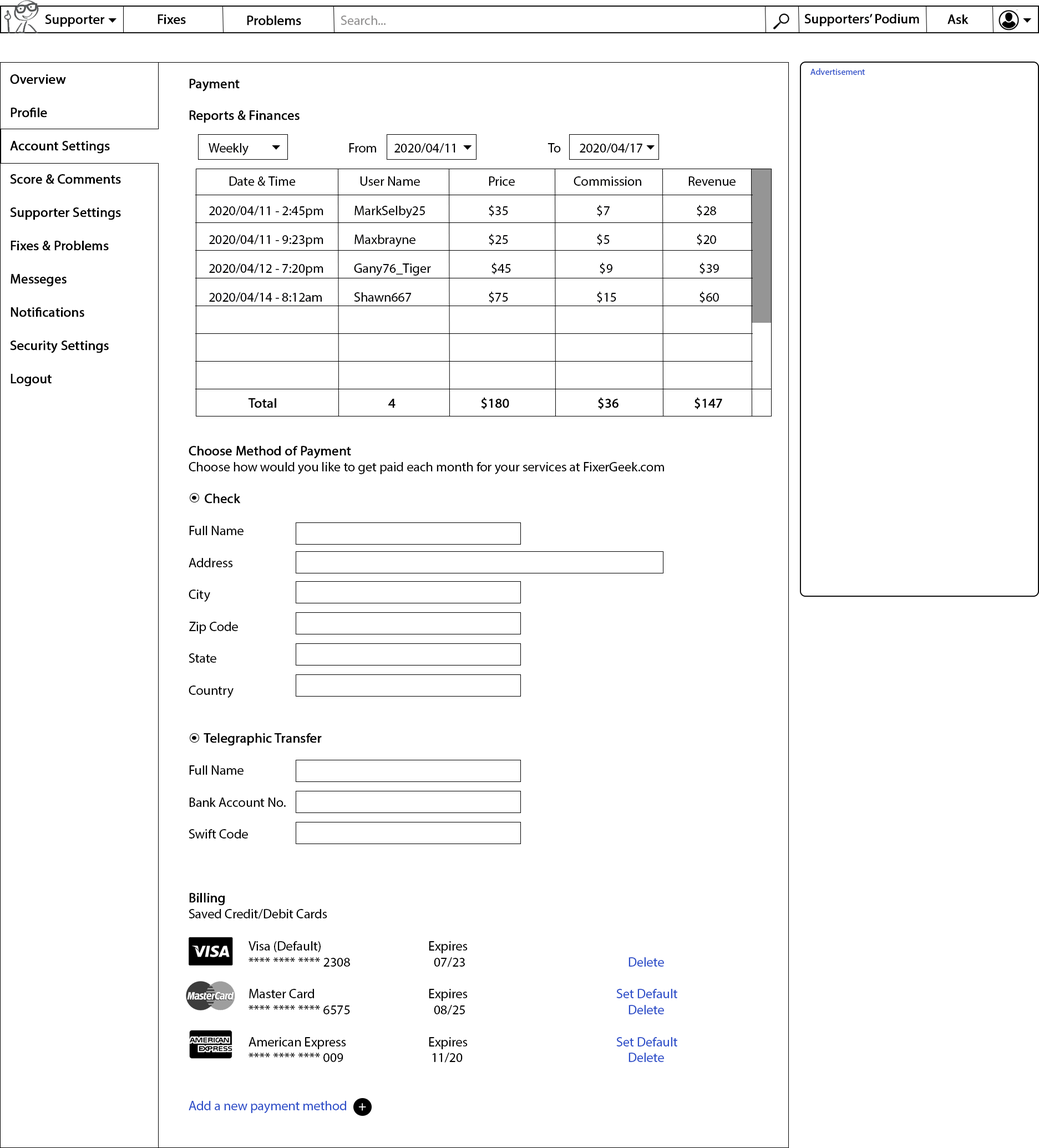
<style>
.page{position:relative;width:1039px;height:1148px;background:#ffffff}
.page>*{position:absolute;margin:0}
.t1{font:13.3px "MyriadPro-Regular";color:#000000;font-weight:bold}
.t2{font:13.3px "MyriadPro-Regular";color:#919090}
.t3{font:13.3px "MyriadPro-Regular";color:#010000;font-weight:bold}
.t4{font:13.3px/33.3px "MyriadPro-Regular";color:#000000;font-weight:bold}
.t5{font:8.9px "MyriadPro-Regular";color:#2d4fc9}
.t6{font:13.3px/14.4px "MyriadPro-Regular";color:#000001}
.t7{font:13.3px/16.6px "MyriadPro-Regular";color:#000001}
.t8{font:13.3px "MyriadPro-Regular";color:#000000}
.t9{font:13.3px "MyriadPro-Regular";color:#2d4fc9}
.t10{font:13.3px "MyriadPro-Regular";color:#ffffff}
</style>
<div class="page">
<p class="t1" style="left:45px;top:14px;width:60px;height:13px">Supporter</p>
<p class="t1" style="left:158px;top:14px;width:28px;height:10px">Fixes</p>
<p class="t1" style="left:247px;top:16px;width:54px;height:10px">Problems</p>
<p class="t2" style="left:341px;top:16px;width:45px;height:9px">Search...</p>
<p class="t3" style="left:804px;top:14px;width:115px;height:13px">Supporters’ Podium</p>
<p class="t1" style="left:947px;top:14px;width:21px;height:10px">Ask</p>
<p class="t4" style="left:10px;top:74px;width:111px;height:313px">Overview<br>Profile<br>Account Settings<br>Score &amp; Comments<br>Supporter Settings<br>Fixes &amp; Problems<br>Messeges<br>Notifications<br>Security Settings<br>Logout</p>
<p class="t5" style="left:810px;top:68px;width:55px;height:7px">Advertisement</p>
<p class="t6" style="left:189px;top:79px;width:546px;height:1034px"><span class="t1">Payment<br><br>Reports &amp; Finances<br><br> </span><span class="t7">Weekly     From   2020/04/11      To     2020/04/17 <br><br>  Date &amp; Time       User Name    Price      Commission   Revenue<br><br></span> 2020/04/11 - 2:45pm    MarkSelby25    $35       $7       $28<br><br> 2020/04/11 - 9:23pm    Maxbrayne    $25       $5       $20<br><br> 2020/04/12 - 7:20pm    Gany76_Tiger    $45        $9        $39<br><br> 2020/04/14 - 8:12am    Shawn667    $75       $15        $60<br><br><br><br><br><span class="t1">         <br><br>   Total      4            $180       $36      $147<br><br><br>Choose Method of Payment<br></span><span class="t8">Choose how would you like to get paid each month for your services at FixerGeek.com<br></span><span class="t1"><br>     Check<br></span><span class="t8"><br>Full Name<br><br>Address<br><br>City<br><br>Zip Code<br><br>State<br><br>Country<br></span><span class="t1"><br><br>     Telegraphic Transfer<br><br></span><span class="t8">Full Name<br><br>Bank Account No.<br><br>Swift Code<br></span><span class="t1"><br><br><br>Billing<br></span><span class="t8">Saved Credit/Debit Cards<br><br>   Visa (Default)      Expires         <br>   **** **** **** 2308       07/23         </span><span class="t9">Delete<br></span><span class="t8"><br>   Master Card      Expires           </span><span class="t9">Set Default<br></span><span class="t8">   **** **** **** 6575      08/25         </span><span class="t9">Delete<br><br></span><span class="t8">   American Express     Expires          </span><span class="t9"> Set Default<br></span><span class="t8">   **** **** **** 009      11/20 </span><span class="t9">        Delete<br><br><br>Add a new payment method   </span><span class="t10"> +</span></p>
</div>
